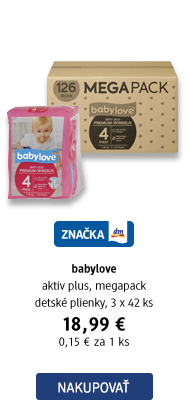
<style>
.page{position:relative;width:188px;height:409px;background:#ffffff}
.page>*{position:absolute;margin:0}
.t1{font:12px/17px "DMBrand-Regular";color:#000000}
.t2{font:12px/17px "DMBrand-Bold";color:#000000}
.t3{font:20px "DMBrand-Bold";letter-spacing:0.04em;color:#000000}
.t4{font:12px/15px "DMBrand-Regular";letter-spacing:0.04em;color:#000000}
.t5{font:14px "DMBrand-Regular";letter-spacing:0.025em;color:#ffffff;text-transform:uppercase}
</style>
<div class="page">
<p class="t1" style="left:35px;top:264px;width:118px;height:84px;text-align:center"><span class="t2">babylove<br></span>aktiv plus, megapack<br>detské plienky, 3 x 42 ks<br><span class="t3">18,99 €<br></span><span class="t4">0,15 € za 1 ks</span></p>
<p class="t5" style="left:58px;top:379px;width:72px;height:14px">Nakupovať</p>
</div>
